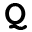
<style>
.page{position:relative;width:32px;height:32px;background:#ffffff}
.page>*{position:absolute;margin:0}
.t1{font:30px "Quicksand-Bold";color:#000000}
</style>
<div class="page">
<p class="t1" style="left:5px;top:3px;width:22px;height:27px">Q</p>
</div>
